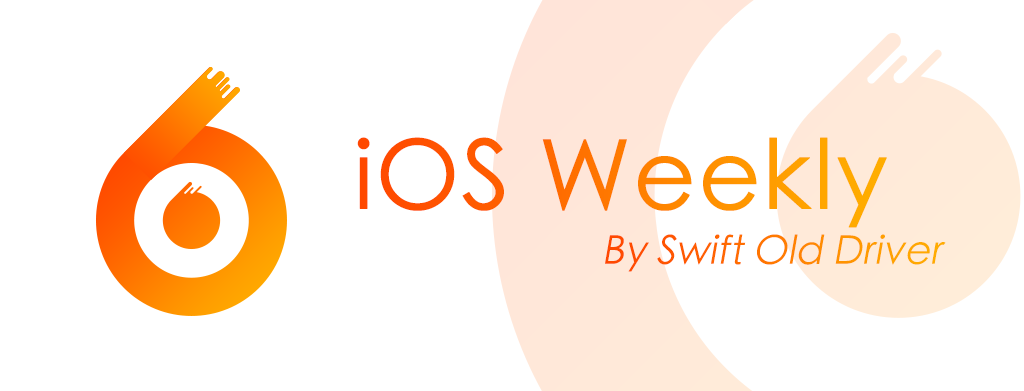
<style>
.page{position:relative;width:1024px;height:391px;background:#ffffff}
.page>*{position:absolute;margin:0}
.t1{font:96px "STHeitiTC-Light";font-weight:bold}
.t2{font:40px "STHeitiTC-Light";font-style:italic}
</style>
<div class="page">
<p class="t1" style="left:357px;top:137px;width:530px;height:91px">iOS Weekly</p>
<p class="t2" style="left:605px;top:234px;width:341px;height:38px">By Swift Old Driver</p>
</div>
